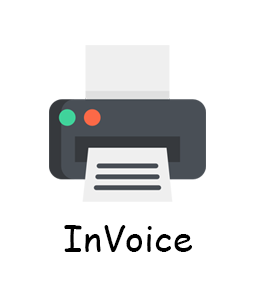
<style>
.page{position:relative;width:255px;height:300px;background:#ffffff}
.page>*{position:absolute;margin:0}
.t1{font:36px "ComicSansMS";color:#000000}
</style>
<div class="page">
<p class="t1" style="left:64px;top:225px;width:128px;height:27px">InVoice</p>
</div>
